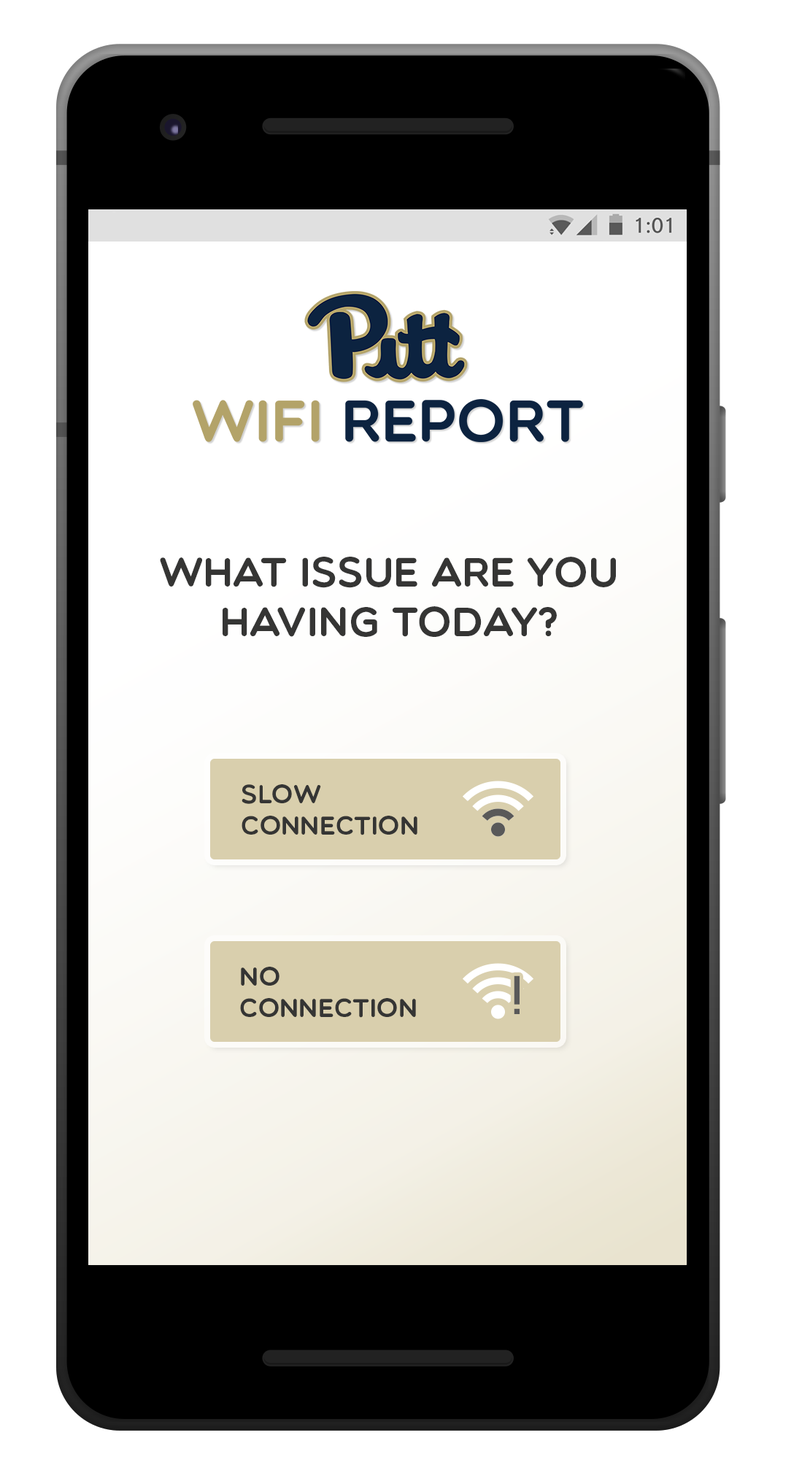
<style>
.page{position:relative;width:810px;height:1473px;background:#ffffff}
.page>*{position:absolute;margin:0}
.t1{font:41.3px "Multicolore";color:#353534}
.t2{font:26px "Multicolore";color:#353534}
</style>
<div class="page">
<p class="t1" style="left:160px;top:557px;width:456px;height:80px;text-align:center">What Issue are you<br>having today?</p>
<p class="t2" style="left:241px;top:784px;width:176px;height:51px">Slow<br>Connection</p>
<p class="t2" style="left:240px;top:967px;width:176px;height:51px">No<br>Connection</p>
</div>
